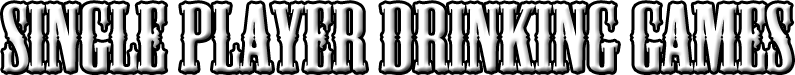
<style>
.page{position:relative;width:795px;height:75px;background:#ffffff}
.page>*{position:absolute;margin:0}
.t1{font:89.2px "MesquiteStd";scale:1.29 1}
</style>
<div class="page">
<p class="t1" style="left:3px;top:3px;width:789px;height:69px">SINGLE PLAYER DRINKING GAMES</p>
</div>
